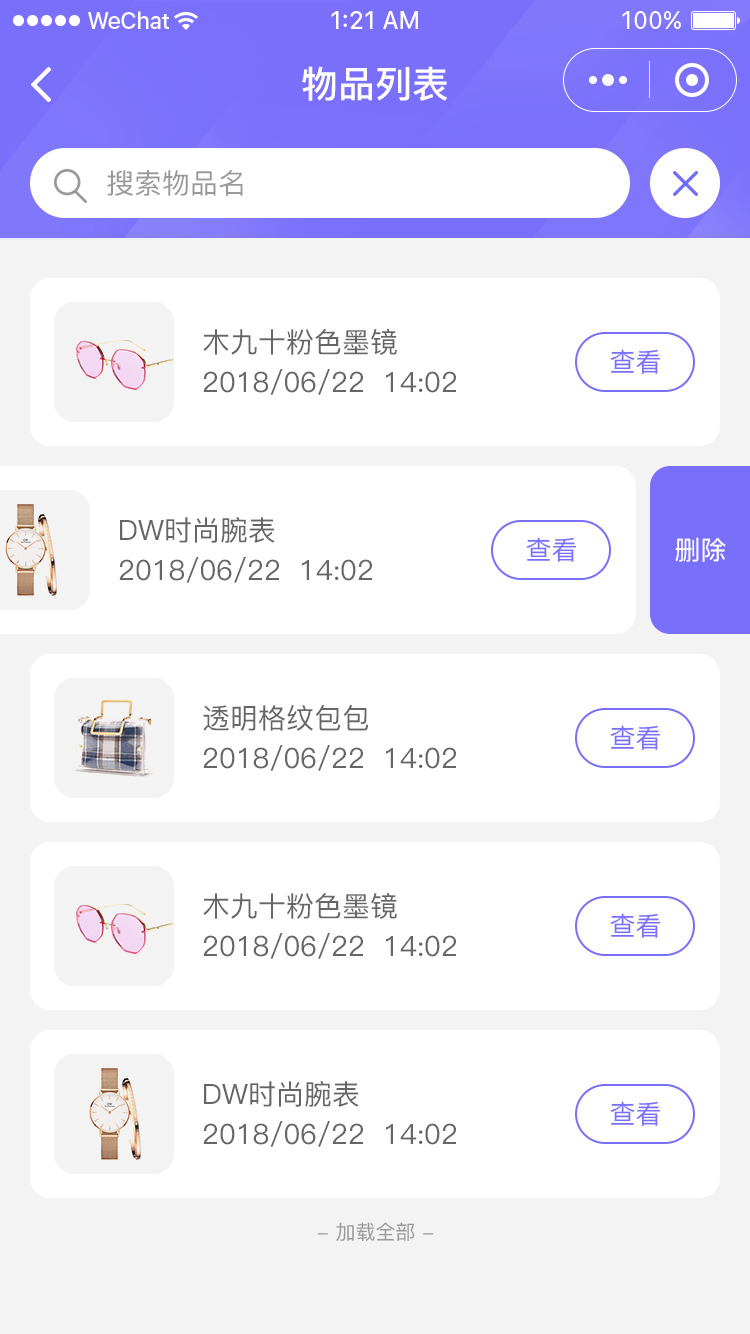
<style>
.page{position:relative;width:750px;height:1334px;background:#ffffff}
.page>*{position:absolute;margin:0}
.t1{font:37px "PingFang-SC-Bold";color:#ffffff}
.t2{font:28px "PingFang-SC-Medium";color:#999999}
.t3{font:28px "PingFang-SC-Medium";color:#666666}
.t4{font:26px "PingFang-SC-Medium";color:#796ffb}
.t5{font:26px "PingFang-SC-Medium";color:#ffffff}
.t6{font:20px "PingFang-SC-Medium";color:#999999}
</style>
<div class="page">
<p class="t1" style="left:302px;top:66px;width:145px;height:35px">物品列表</p>
<p class="t2" style="left:107px;top:170px;width:136px;height:26px">搜索物品名</p>
<p class="t3" style="left:203px;top:328px;width:194px;height:27px">木九十粉色墨镜</p>
<p class="t4" style="left:610px;top:349px;width:51px;height:25px">查看</p>
<p class="t3" style="left:203px;top:369px;width:253px;height:26px">2018/06/22  14:02</p>
<p class="t3" style="left:120px;top:517px;width:155px;height:26px">DW时尚腕表</p>
<p class="t4" style="left:526px;top:537px;width:51px;height:25px">查看</p>
<p class="t5" style="left:675px;top:537px;width:51px;height:25px">删除</p>
<p class="t3" style="left:119px;top:557px;width:253px;height:26px">2018/06/22  14:02</p>
<p class="t3" style="left:203px;top:705px;width:165px;height:26px">透明格纹包包</p>
<p class="t4" style="left:610px;top:725px;width:51px;height:25px">查看</p>
<p class="t3" style="left:203px;top:745px;width:253px;height:26px">2018/06/22  14:02</p>
<p class="t3" style="left:203px;top:892px;width:194px;height:27px">木九十粉色墨镜</p>
<p class="t4" style="left:610px;top:913px;width:51px;height:25px">查看</p>
<p class="t3" style="left:203px;top:933px;width:253px;height:26px">2018/06/22  14:02</p>
<p class="t3" style="left:204px;top:1081px;width:155px;height:26px">DW时尚腕表</p>
<p class="t4" style="left:610px;top:1101px;width:51px;height:25px">查看</p>
<p class="t3" style="left:203px;top:1121px;width:253px;height:26px">2018/06/22  14:02</p>
<p class="t6" style="left:317px;top:1222px;width:117px;height:20px">- 加载全部 -</p>
</div>
